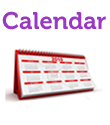
<style>
.page{position:relative;width:110px;height:125px;background:#ffffff}
.page>*{position:absolute;margin:0}
.t1{font:24px "Museo-700";color:#9a37c4}
</style>
<div class="page">
<p class="t1" style="left:2px;top:11px;width:104px;height:19px">Calendar</p>
</div>
